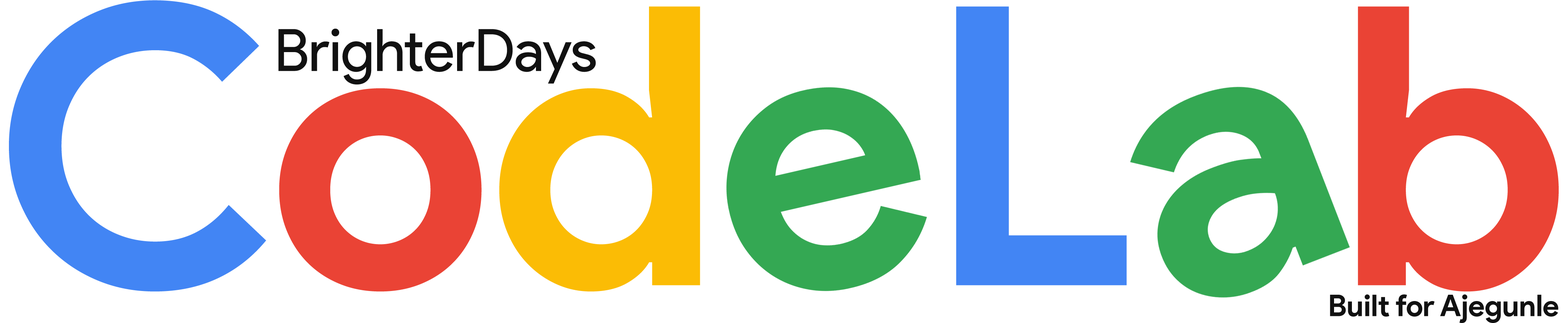
<style>
.page{position:relative;width:1568px;height:323px;background:#ffffff}
.page>*{position:absolute;margin:0}
.t1{font:58.3px "ProductSans-Regular";letter-spacing:-0.01em;color:#111111}
.t2{font:29.9px "ProductSans-Bold";letter-spacing:-0.01em;color:#111111}
</style>
<div class="page">
<p class="t1" style="left:278px;top:29px;width:318px;height:55px">BrighterDays</p>
<p class="t2" style="left:1330px;top:294px;width:228px;height:29px">Built for Ajegunle</p>
</div>
